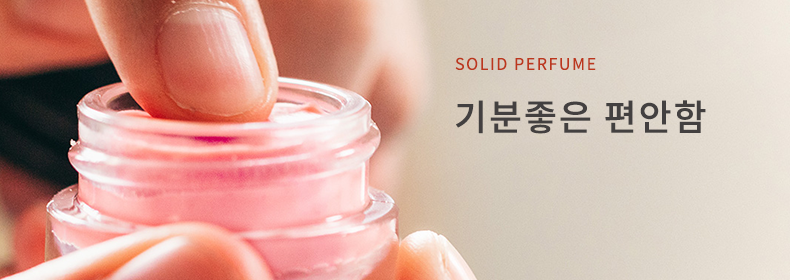
<style>
.page{position:relative;width:790px;height:280px}
.page>*{position:absolute;margin:0}
.t1{font:16px "NotoSansCJKkr-Regular";letter-spacing:0.1em;color:#bc371d}
.t2{font:36px "NotoSansCJKkr-Medium";letter-spacing:0.05em;color:#434040}
</style>
<div class="page">
<p class="t1" style="left:455px;top:57px;width:141px;height:13px">SOLID PERFUME</p>
<p class="t2" style="left:456px;top:100px;width:250px;height:34px">기분좋은 편안함</p>
</div>
